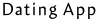
<style>
.page{position:relative;width:100px;height:20px;background:#ffffff}
.page>*{position:absolute;margin:0}
.t1{font:17.6px "Amira-Roman";letter-spacing:0.112em;color:#000000;scale:0.93 1}
</style>
<div class="page">
<p class="t1" style="left:3px;top:2px;width:93px;height:17px">Dating App</p>
</div>
